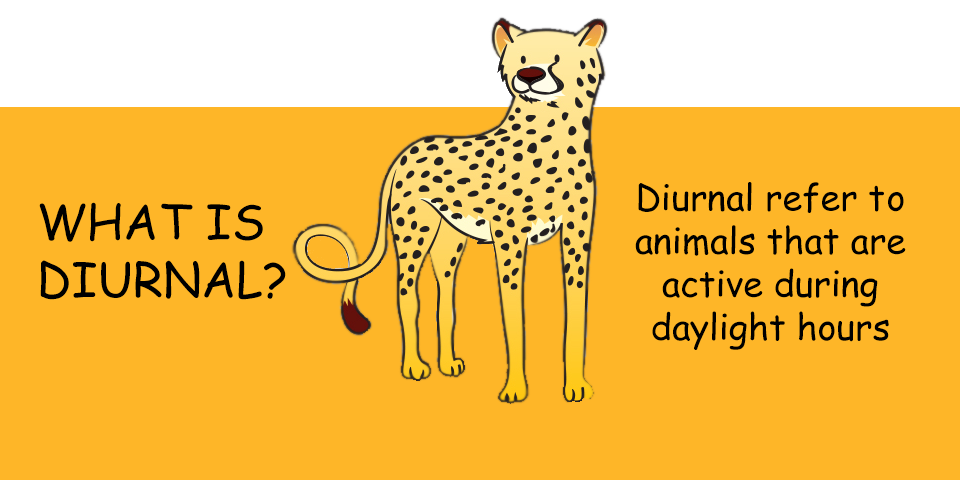
<style>
.page{position:relative;width:960px;height:480px;background:#feb628}
.page>*{position:absolute;margin:0}
.t1{font:36px "ComicSansMS";color:#000000}
.t2{font:48px "ComicSansMS";color:#000000}
</style>
<div class="page">
<p class="t1" style="left:635px;top:182px;width:271px;height:168px;text-align:center">Diurnal refer to<br>animals that are<br>active during<br>daylight hours</p>
<p class="t2" style="left:39px;top:202px;width:247px;height:98px">WHAT IS<br>DIURNAL?</p>
</div>
